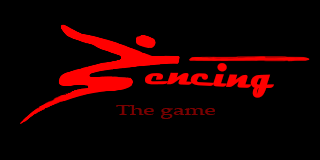
<style>
.page{position:relative;width:320px;height:160px;background:#000000}
.page>*{position:absolute;margin:0}
.t1{font:36px "Magneto-Bold";color:#ff0000}
.t2{font:13.9px "PalatinoLinotype-Roman";color:#7a0000;scale:1.66 1}
</style>
<div class="page">
<p class="t1" style="left:145px;top:63px;width:129px;height:35px">encing</p>
<p class="t2" style="left:116px;top:105px;width:99px;height:14px">The game</p>
</div>
